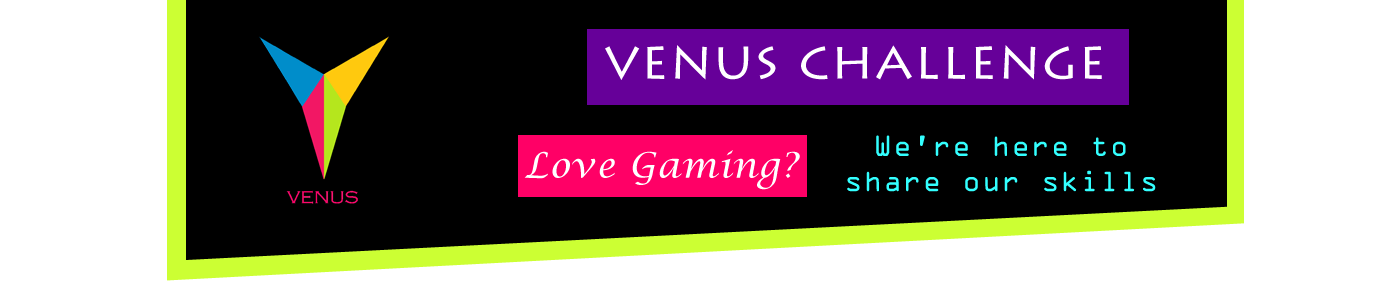
<style>
.page{position:relative;width:1400px;height:300px;background:#000000}
.page>*{position:absolute;margin:0}
.t1{font:52.9px "LithosPro-Regular";letter-spacing:0.025em;color:#ffffff}
.t2{font:26.5px/35.3px "OCRAStd";letter-spacing:0.025em;color:#33ffff}
.t3{font:35.3px "LucidaCalligraphy-Italic";letter-spacing:0.025em;color:#ffffff}
</style>
<div class="page">
<p class="t1" style="left:605px;top:45px;width:497px;height:35px">venus challenge</p>
<p class="t2" style="left:847px;top:135px;width:309px;height:57px;text-align:center">We’re here to share our skills</p>
<p class="t3" style="left:524px;top:150px;width:276px;height:40px">Love Gaming?</p>
</div>
